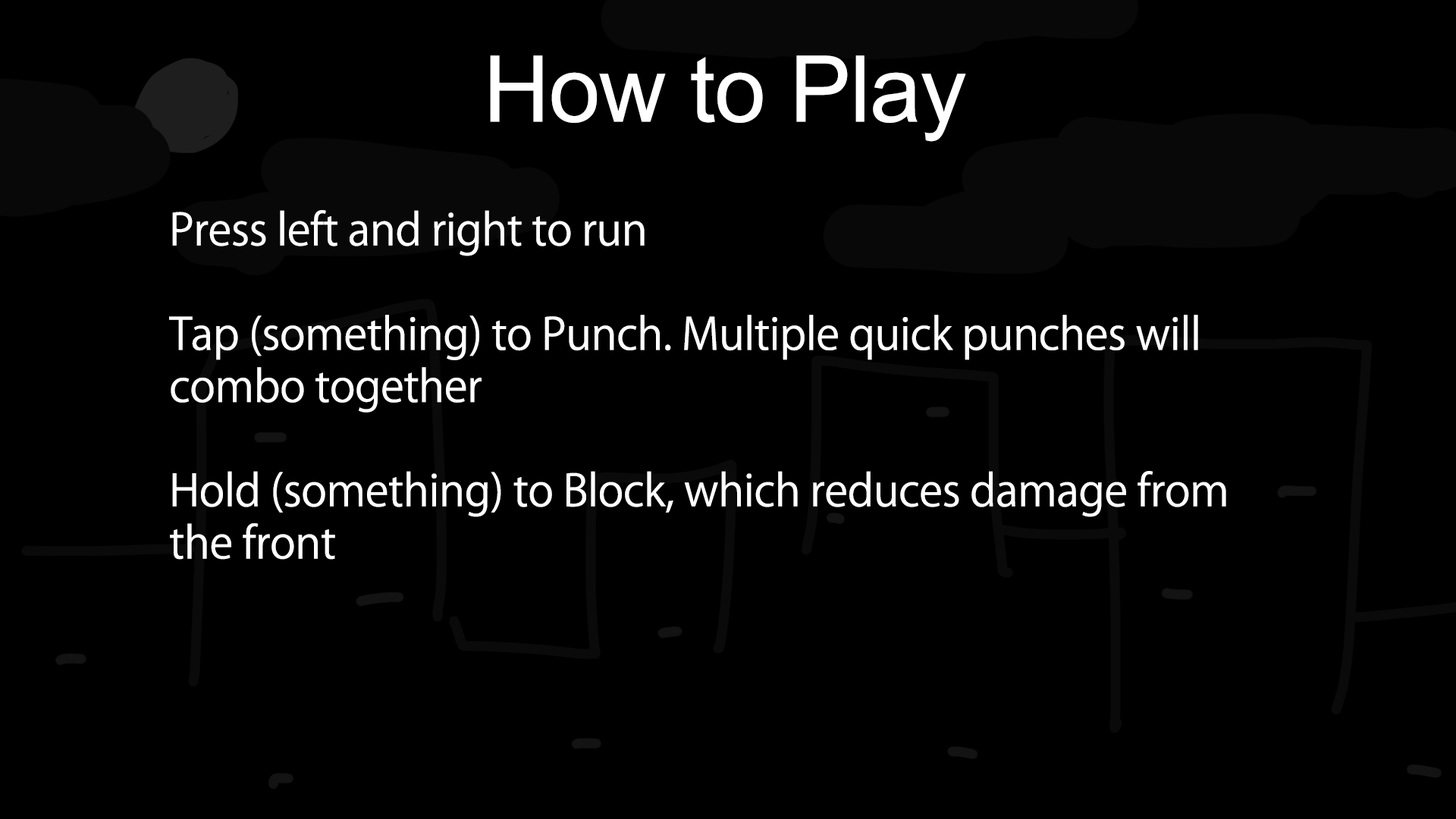
<style>
.page{position:relative;width:1456px;height:819px;background:#000000}
.page>*{position:absolute;margin:0}
.t1{font:92.3px "ArialMT";letter-spacing:-0.01em;color:#ffffff}
.t2{font:43.5px "KozGoPr6N-Regular";letter-spacing:-0.01em;color:#ffffff}
</style>
<div class="page">
<p class="t1" style="left:490px;top:55px;width:476px;height:87px">How to Play</p>
<p class="t2" style="left:169px;top:210px;width:1057px;height:350px">Press left and right to run<br><br>Tap (something) to Punch. Multiple quick punches will<br>combo together<br><br>Hold (something) to Block, which reduces damage from<br>the front</p>
</div>
